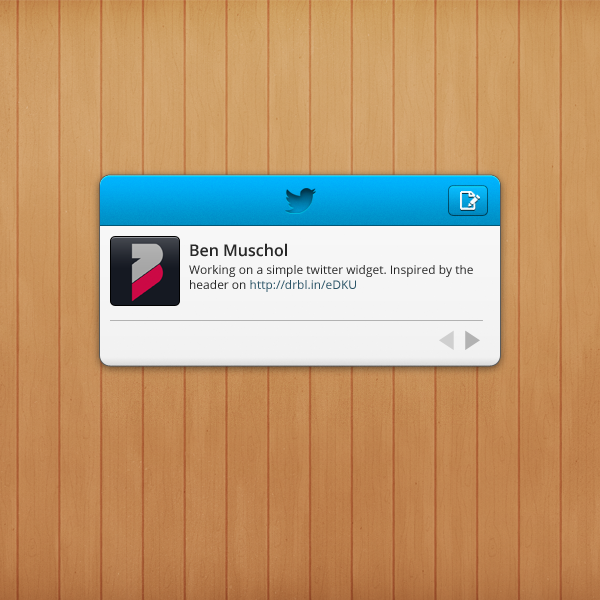
<style>
.page{position:relative;width:600px;height:600px}
.page>*{position:absolute;margin:0}
.t1{font:12px/18px "OpenSans";color:#272727}
.t2{font:16px/22px "OpenSans-Semibold";color:#272727}
.t3{font:12px "OpenSans";color:#272727}
.t4{font:12px "OpenSans";color:#2a5366}
</style>
<div class="page">
<p class="t1" style="left:189px;top:243px;width:284px;height:49px"><span class="t2">Ben Muschol<br></span>Working on a simple twitter widget. Inspired by the <span class="t3">header on </span><span class="t4">http://drbl.in/eDKU</span></p>
</div>
